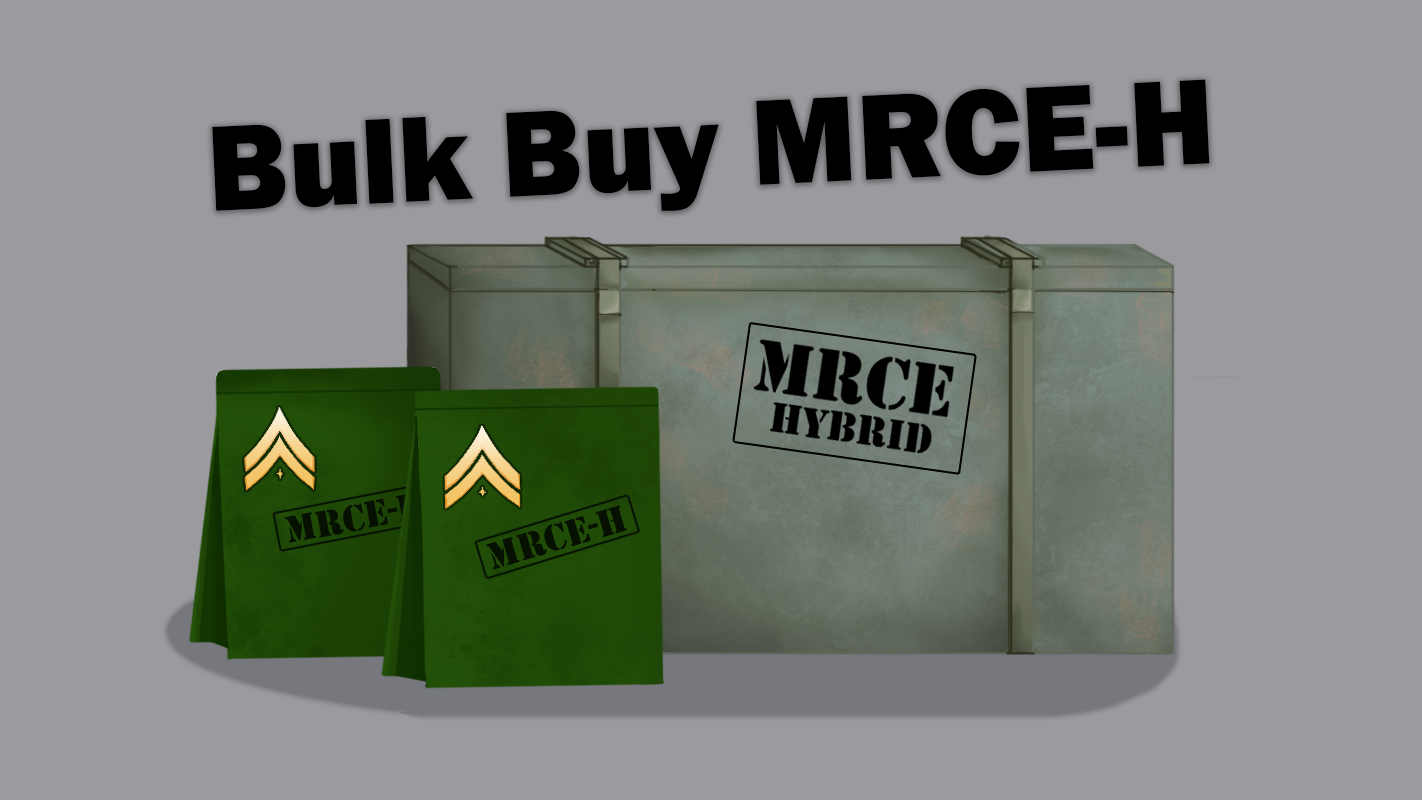
<style>
.page{position:relative;width:1422px;height:800px;background:#9a9a9f}
.page>*{position:absolute;margin:0}
.t1{font:125.6px "FranklinGothic-Heavy";color:#000000}
.t2{font:39px "Stencil";color:#061102}
</style>
<div class="page">
<p class="t1" style="left:212px;top:79px;width:998px;height:132px;rotate:-3deg">Bulk Buy MRCE-H</p>
<p class="t2" style="left:284px;top:491px;width:142px;height:52px;rotate:-11deg">MRCE-H</p>
<p class="t2" style="left:486px;top:505px;width:141px;height:65px;rotate:-17deg">MRCE-H</p>
</div>
